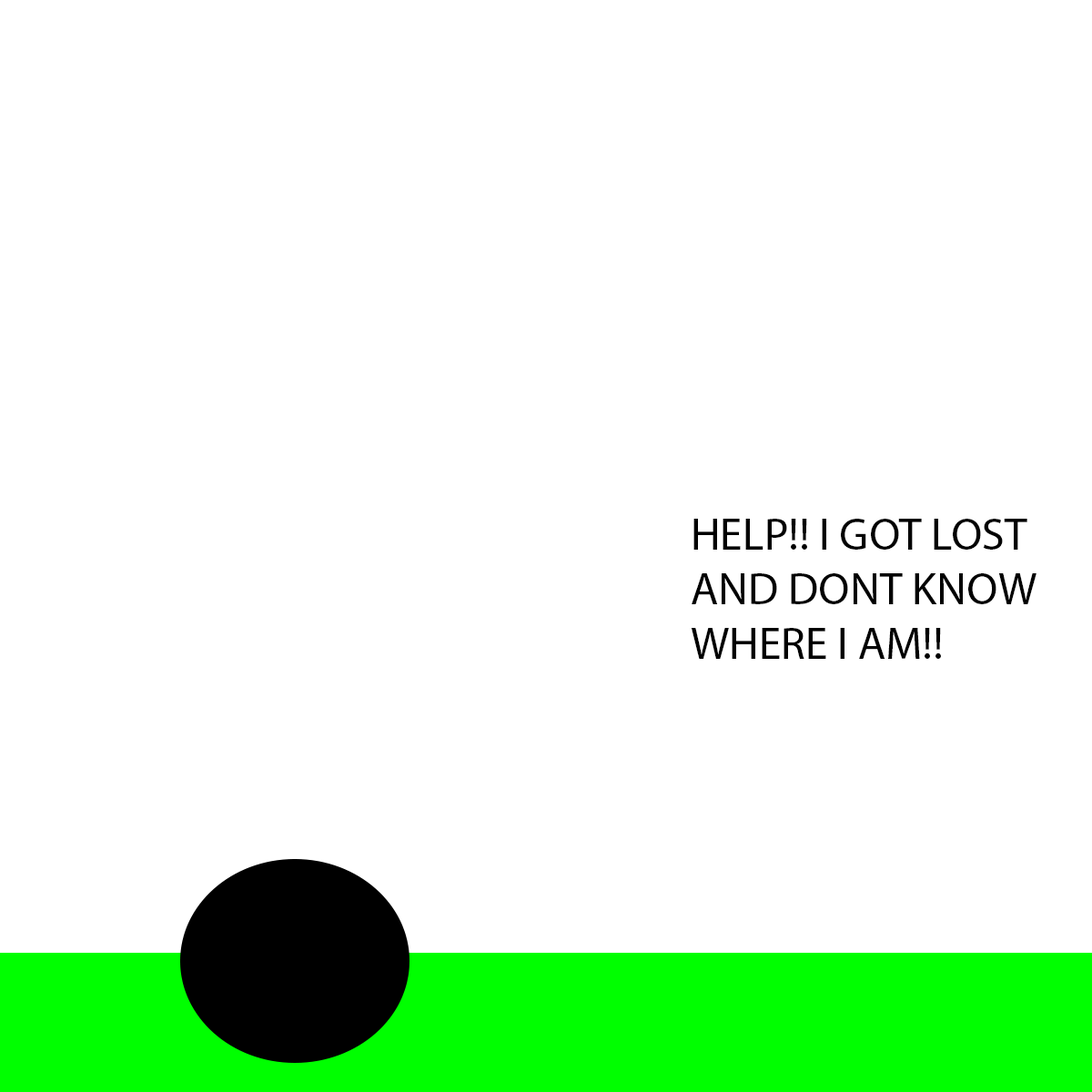
<style>
.page{position:relative;width:1092px;height:1092px;background:#ffffff}
.page>*{position:absolute;margin:0}
.t1{font:45.5px "MyriadPro-Regular";color:#000000}
</style>
<div class="page">
<p class="t1" style="left:691px;top:519px;width:345px;height:140px">HELP!! I GOT LOST<br>AND DONT KNOW<br>WHERE I AM!!</p>
</div>
